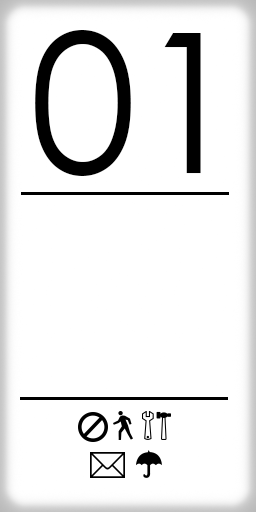
<style>
.page{position:relative;width:256px;height:512px;background:#ffffff}
.page>*{position:absolute;margin:0}
.t1{font:195.3px "CenturyGothic";color:#000000;font-variant:small-caps}
</style>
<div class="page">
<p class="t1" style="left:35px;top:30px;width:166px;height:146px">01</p>
</div>
